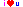
<style>
.page{position:relative;width:23px;height:7px;background:#ffffff}
.page>*{position:absolute;margin:0}
.t1{font:11.7px "Microsoft-Himalaya";color:#ff00ff}
.t2{font:11.7px "SegoeUI";color:#ff0000}
.t3{font:11.7px "Microsoft-Himalaya";color:#0000ff}
</style>
<div class="page">
<p class="t1" style="left:4px;top:0px;width:1px;height:6px">i</p>
<p class="t2" style="left:7px;top:0px;width:7px;height:7px">♥</p>
<p class="t3" style="left:16px;top:2px;width:3px;height:4px">u</p>
</div>
